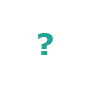
<style>
.page{position:relative;width:90px;height:90px;background:#ffffff}
.page>*{position:absolute;margin:0}
.t1{font:30px "Verdana-Bold";letter-spacing:-0.15em;color:#20a493}
</style>
<div class="page">
<p class="t1" style="left:38px;top:33px;width:15px;height:22px">?</p>
</div>
